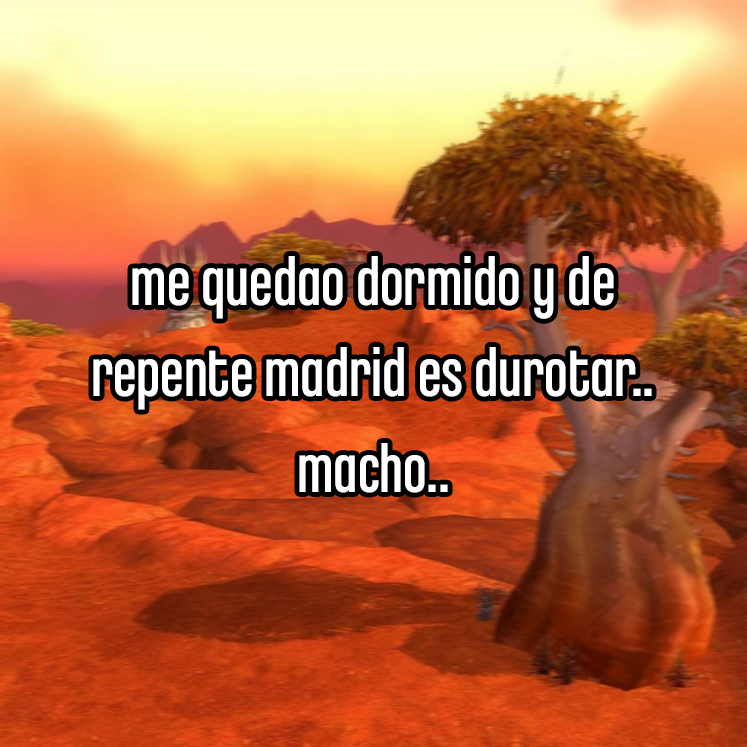
<style>
.page{position:relative;width:747px;height:747px}
.page>*{position:absolute;margin:0}
.t1{font:70.9px "ChaletComprime-CologneEighty";color:#ffffff}
</style>
<div class="page">
<p class="t1" style="left:93px;top:256px;width:559px;height:154px;text-align:center">me quedao dormido y de<br>repente madrid es durotar..</p>
<p class="t1" style="left:299px;top:443px;width:149px;height:50px">macho..</p>
</div>
